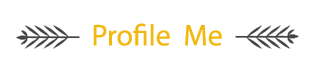
<style>
.page{position:relative;width:314px;height:63px;background:#ffffff}
.page>*{position:absolute;margin:0}
.t1{font:30px "MyriadPro-Regular";color:#f1b90f}
</style>
<div class="page">
<p class="t1" style="left:93px;top:23px;width:129px;height:23px">Profile  Me</p>
</div>
